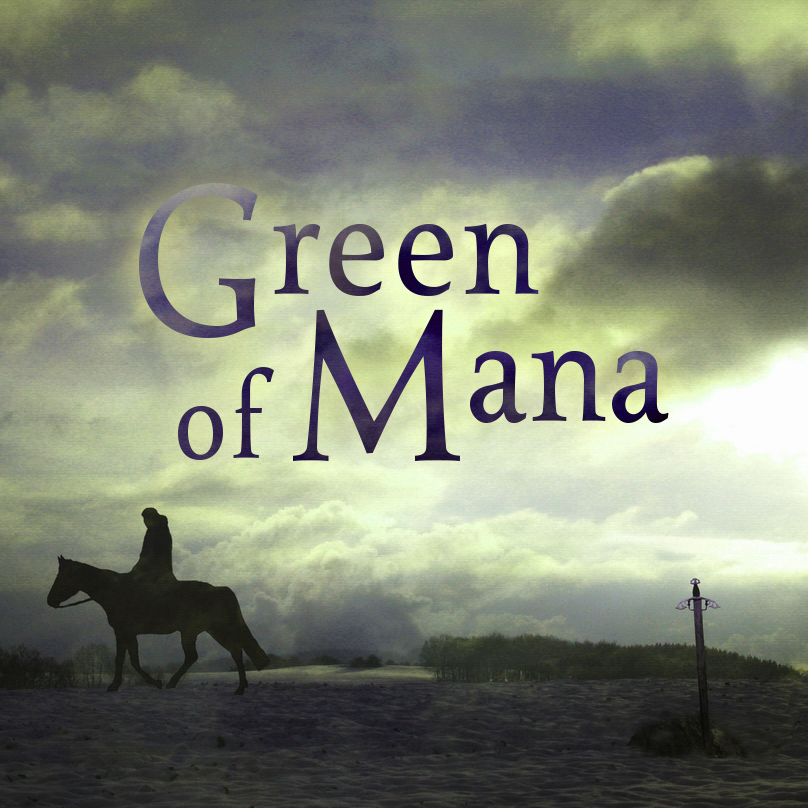
<style>
.page{position:relative;width:808px;height:808px}
.page>*{position:absolute;margin:0}
.t1{font:169.1px "Seshat-Regular";letter-spacing:0.025em;scale:0.91 1}
.t2{font:220.8px "Seshat-Regular";letter-spacing:0.025em;scale:0.91 1}
.t3{font:169.1px "Seshat-Regular";color:#2f214e;scale:0.91 1}
.t4{font:220.8px "Seshat-Regular";color:#2f214e;scale:0.91 1}
.t5{font:125.9px "Seshat-Regular";letter-spacing:0.025em;color:#30224e;scale:0.91 1}
</style>
<div class="page">
<p class="t1" style="left:139px;top:183px;width:400px;height:155px"><span class="t2">G</span>reen</p>
<p class="t3" style="left:293px;top:309px;width:376px;height:152px"><span class="t4">M</span>ana</p>
<p class="t5" style="left:178px;top:367px;width:96px;height:93px">of</p>
</div>
